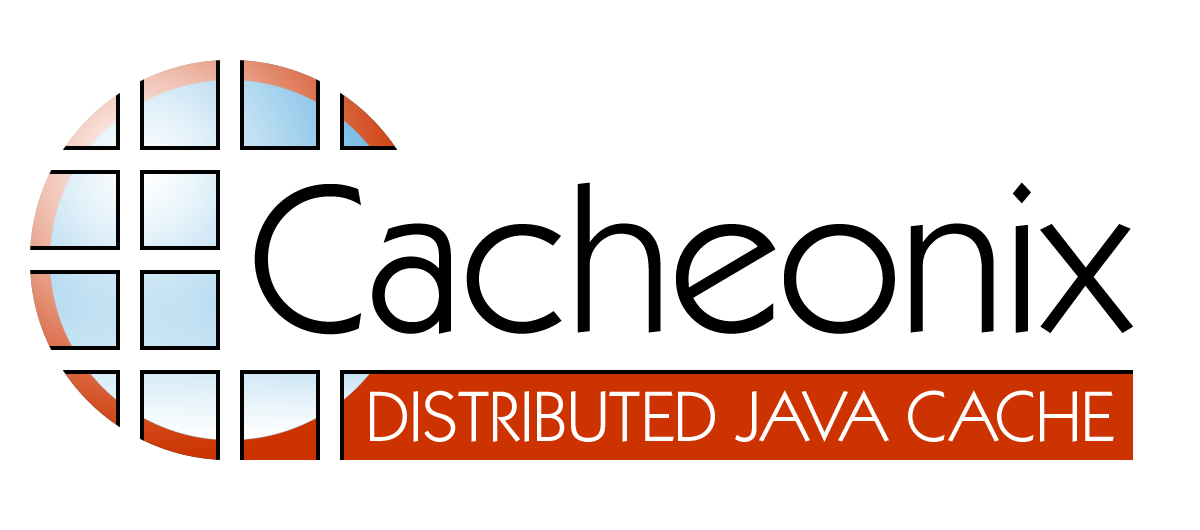
<style>
.page{position:relative;width:1200px;height:530px;background:#ffffff}
.page>*{position:absolute;margin:0}
.t1{font:210px "KabelITCbyBT-Book";color:#000000}
.t2{font:72px "KabelITCbyBT-Book";color:#ffffff}
.t3{font:72px "KabelITCbyBT-Book";letter-spacing:-0.05em;color:#ffffff}
</style>
<div class="page">
<p class="t1" style="left:254px;top:182px;width:879px;height:153px">Cacheonix</p>
<p class="t2" style="left:370px;top:390px;width:744px;height:52px">DISTRIBUTED J<span class="t3">AV</span>A CACHE</p>
</div>
